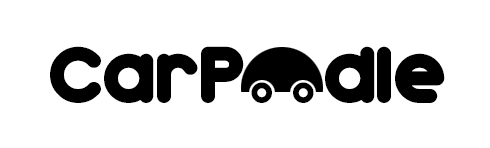
<style>
.page{position:relative;width:490px;height:148px;background:#ffffff}
.page>*{position:absolute;margin:0}
.t1{font:72px "Dunkin";letter-spacing:-0.05em;color:#000000}
.t2{font:30px "Dunkin";letter-spacing:-0.04em;color:#000000}
</style>
<div class="page">
<p class="t1" style="left:50px;top:46px;width:194px;height:57px">CarP</p>
<p class="t1" style="left:325px;top:46px;width:120px;height:57px">dle</p>
<p class="t2" style="left:251px;top:82px;width:63px;height:21px">o o</p>
</div>
